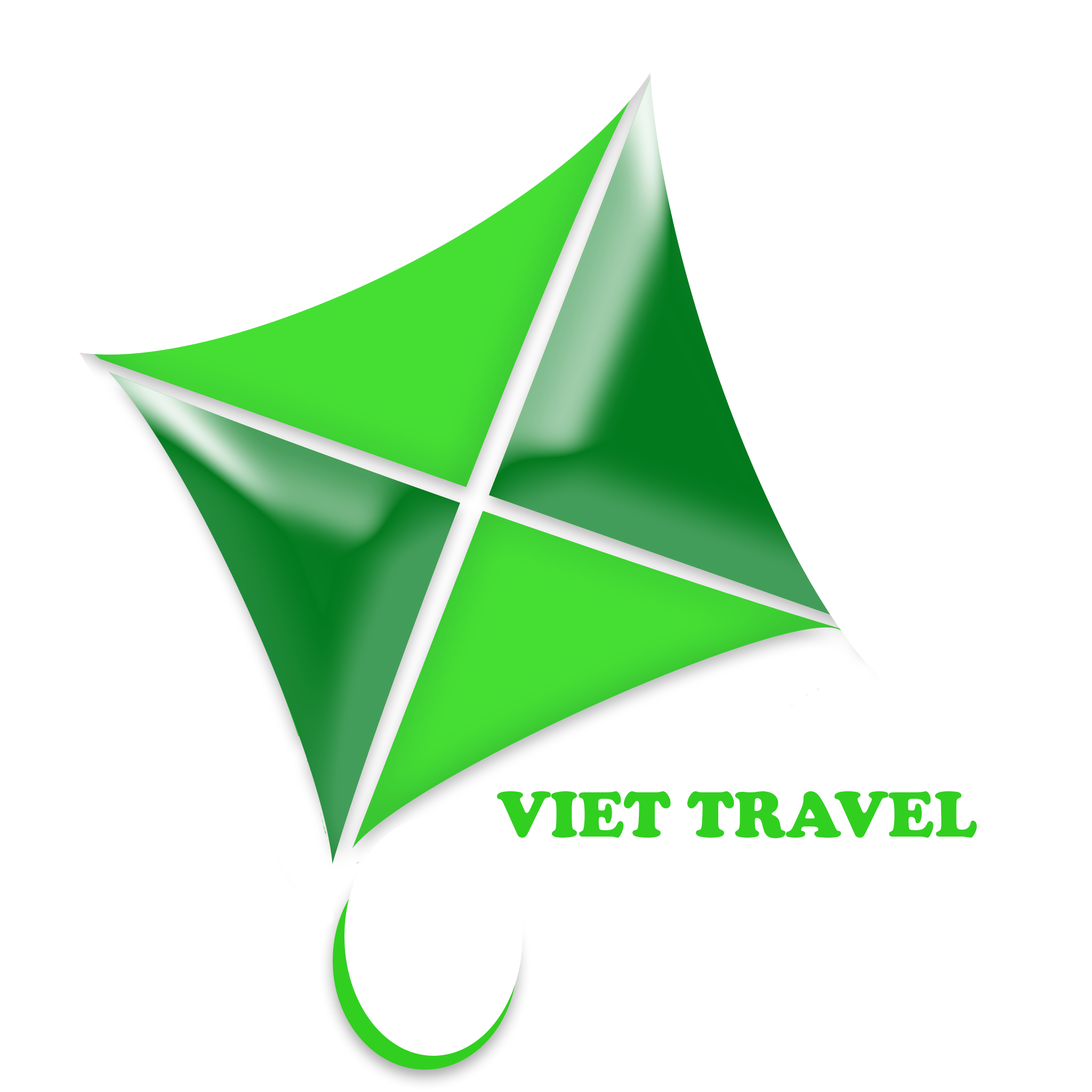
<style>
.page{position:relative;width:1092px;height:1092px;background:#ffffff}
.page>*{position:absolute;margin:0}
.t1{font:66.6px "CooperBlack";color:#31cf20}
</style>
<div class="page">
<p class="t1" style="left:497px;top:791px;width:174px;height:47px">VIET</p>
<p class="t1" style="left:687px;top:791px;width:290px;height:47px">TRAVEL</p>
</div>
